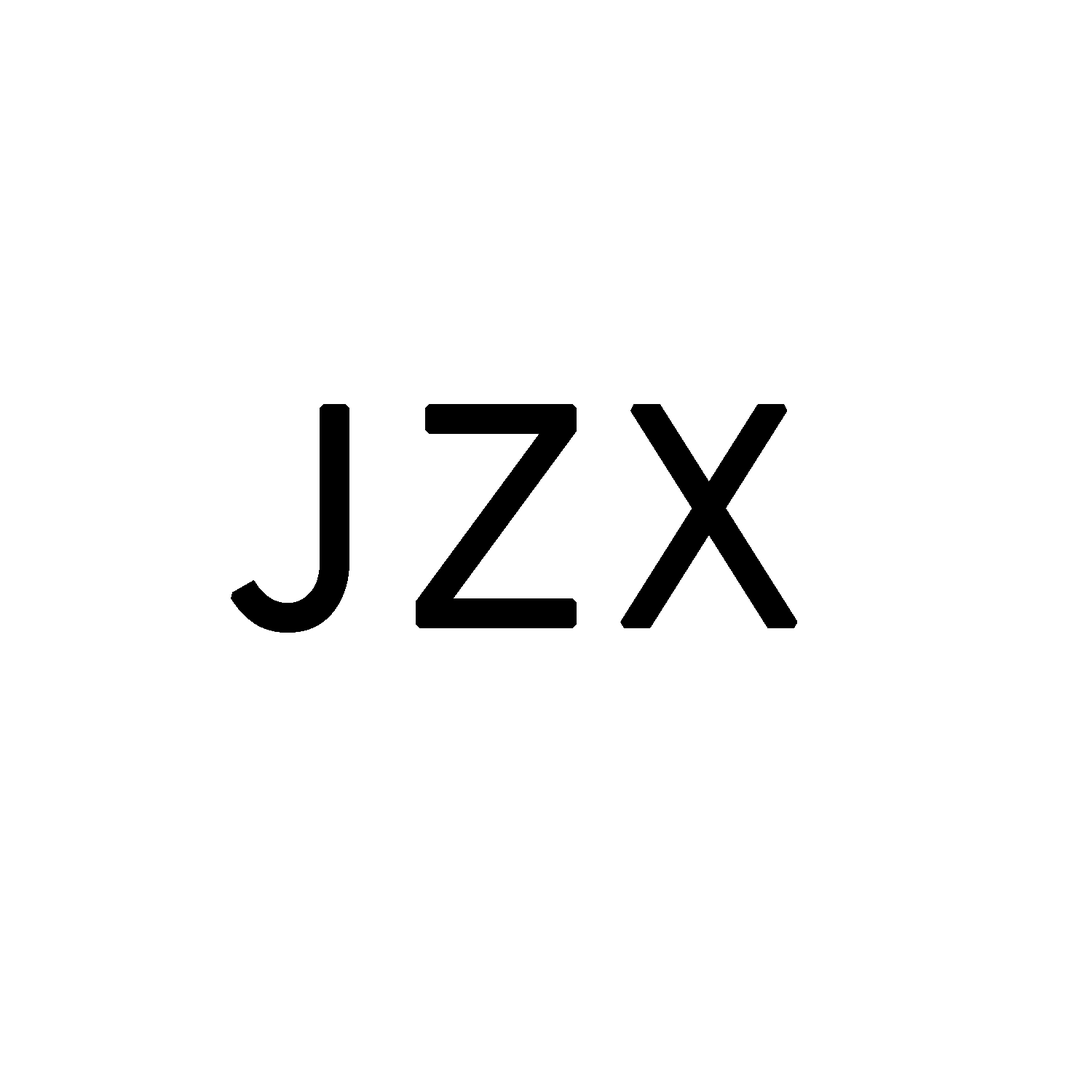
<style>
.page{position:relative;width:1092px;height:1092px;background:#ffffff}
.page>*{position:absolute;margin:0}
.t1{font:291.2px "NewsGothicMT";letter-spacing:0.08em;color:#000000;font-weight:bold}
</style>
<div class="page">
<p class="t1" style="left:231px;top:404px;width:566px;height:229px">JZX</p>
</div>
